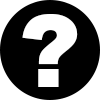
<style>
.page{position:relative;width:100px;height:100px;background:#000000}
.page>*{position:absolute;margin:0}
.t1{font:101px "Arial-Black";color:#ffffff}
</style>
<div class="page">
<p class="t1" style="left:22px;top:14px;width:56px;height:73px">?</p>
</div>
